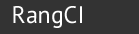
<style>
.page{position:relative;width:139px;height:34px;background:#333333}
.page>*{position:absolute;margin:0}
.t1{font:24px "PTSans-Regular";color:#ffffff}
</style>
<div class="page">
<p class="t1" style="left:13px;top:6px;width:69px;height:22px">RangCI</p>
</div>
